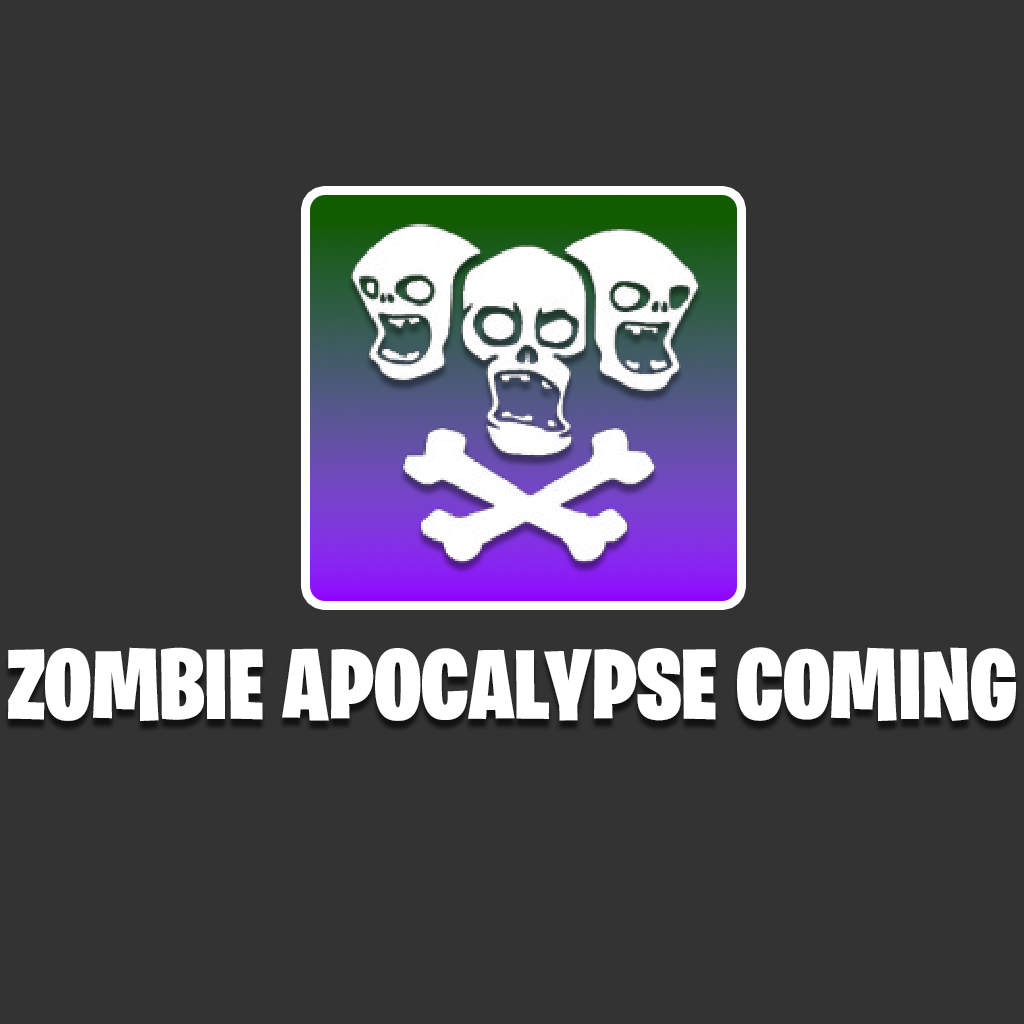
<style>
.page{position:relative;width:1024px;height:1024px;background:#333333}
.page>*{position:absolute;margin:0}
.t1{font:100px "BurbankBigCondensed-Black";color:#ffffff}
</style>
<div class="page">
<p class="t1" style="left:8px;top:647px;width:1008px;height:74px">ZOMBIE APOCALYPSE COMING</p>
</div>
